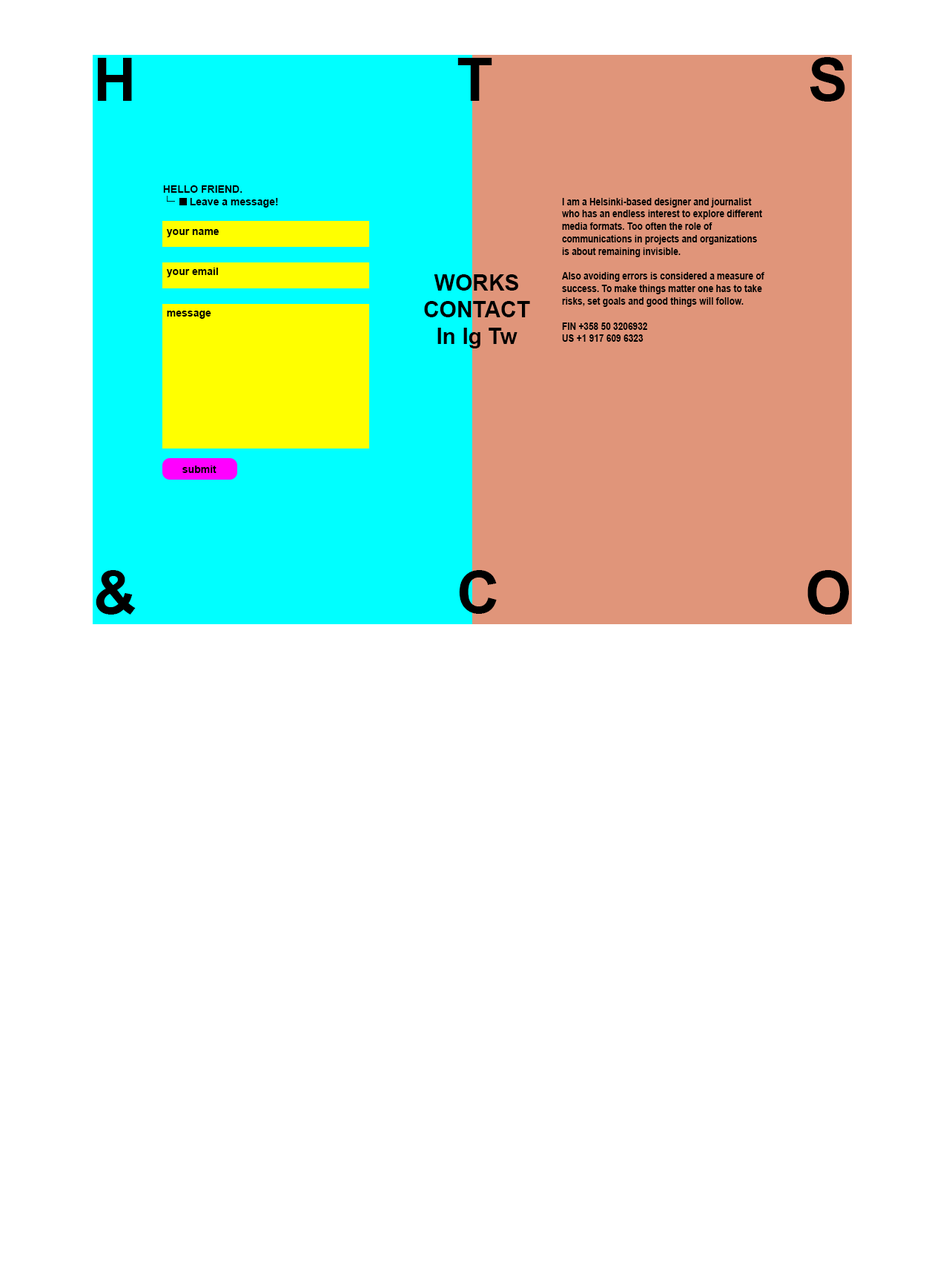
<style>
.page{position:relative;width:946px;height:1261px;background:#ffffff}
.page>*{position:absolute;margin:0}
.t1{font:59.3px "Arial-BoldMT";color:#000000}
.t2{font:10.4px "Arial-BoldMT";color:#000000}
.t3{font:10.4px "Arial-BoldMT";color:#000000;scale:0.85 1}
.t4{font:22.2px "Arial-BoldMT";color:#000000}
</style>
<div class="page">
<p class="t1" style="left:97px;top:57px;width:748px;height:45px">H             T              S</p>
<p class="t2" style="left:163px;top:185px;width:115px;height:23px">HELLO FRIEND.<br> Leave a message!</p>
<p class="t3" style="left:562px;top:198px;width:203px;height:144px">I am a Helsinki-based designer and journalist who has an endless interest to explore different media formats. Too often the role of communications in projects and organizations is about remaining invisible. <br><br>Also avoiding errors is considered a measure of success. To make things matter one has to take risks, set goals and good things will follow.<br><br>FIN +358 50 3206932<br>US +1 917 609 6323</p>
<p class="t2" style="left:166px;top:229px;width:53px;height:8px">your name</p>
<p class="t2" style="left:166px;top:268px;width:52px;height:9px">your email</p>
<p class="t4" style="left:424px;top:274px;width:106px;height:74px;text-align:center">WORKS<br>CONTACT<br>In Ig Tw</p>
<p class="t2" style="left:167px;top:311px;width:44px;height:8px">message</p>
<p class="t2" style="left:182px;top:465px;width:34px;height:8px">submit</p>
<p class="t1" style="left:96px;top:570px;width:753px;height:44px">&amp;             C            O</p>
</div>
